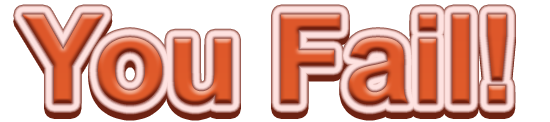
<style>
.page{position:relative;width:550px;height:122px;background:#ffffff}
.page>*{position:absolute;margin:0}
.t1{font:123.2px "Arial-BoldMT";scale:0.97 1}
</style>
<div class="page">
<p class="t1" style="left:23px;top:14px;width:483px;height:91px">You Fail!</p>
<p class="t1" style="left:23px;top:20px;width:483px;height:91px">You Fail!</p>
</div>
